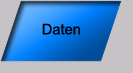
<style>
.page{position:relative;width:133px;height:73px;background:#c6c3c6}
.page>*{position:absolute;margin:0}
.t1{font:14.7px "ArialMT";color:#000000}
</style>
<div class="page">
<p class="t1" style="left:42px;top:23px;width:38px;height:12px">Daten</p>
</div>
